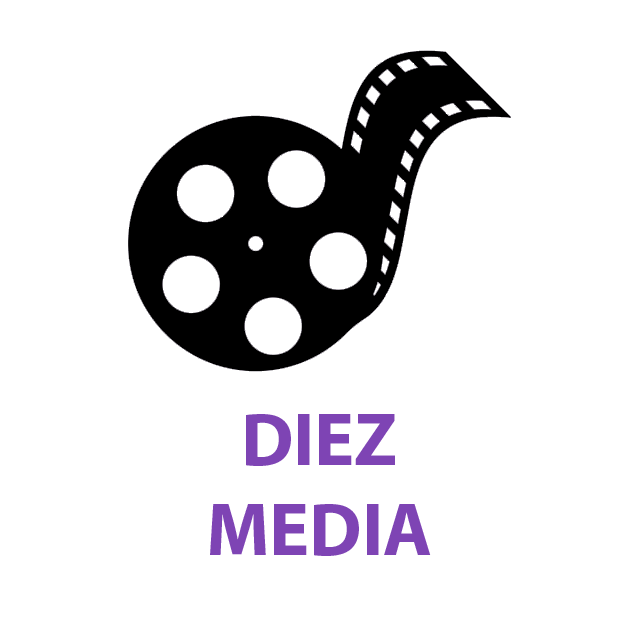
<style>
.page{position:relative;width:640px;height:640px;background:#ffffff}
.page>*{position:absolute;margin:0}
.t1{font:75px "MyriadPro-Bold";color:#7e44b4}
</style>
<div class="page">
<p class="t1" style="left:210px;top:414px;width:221px;height:142px;text-align:center">DIEZ<br>MEDIA</p>
</div>
